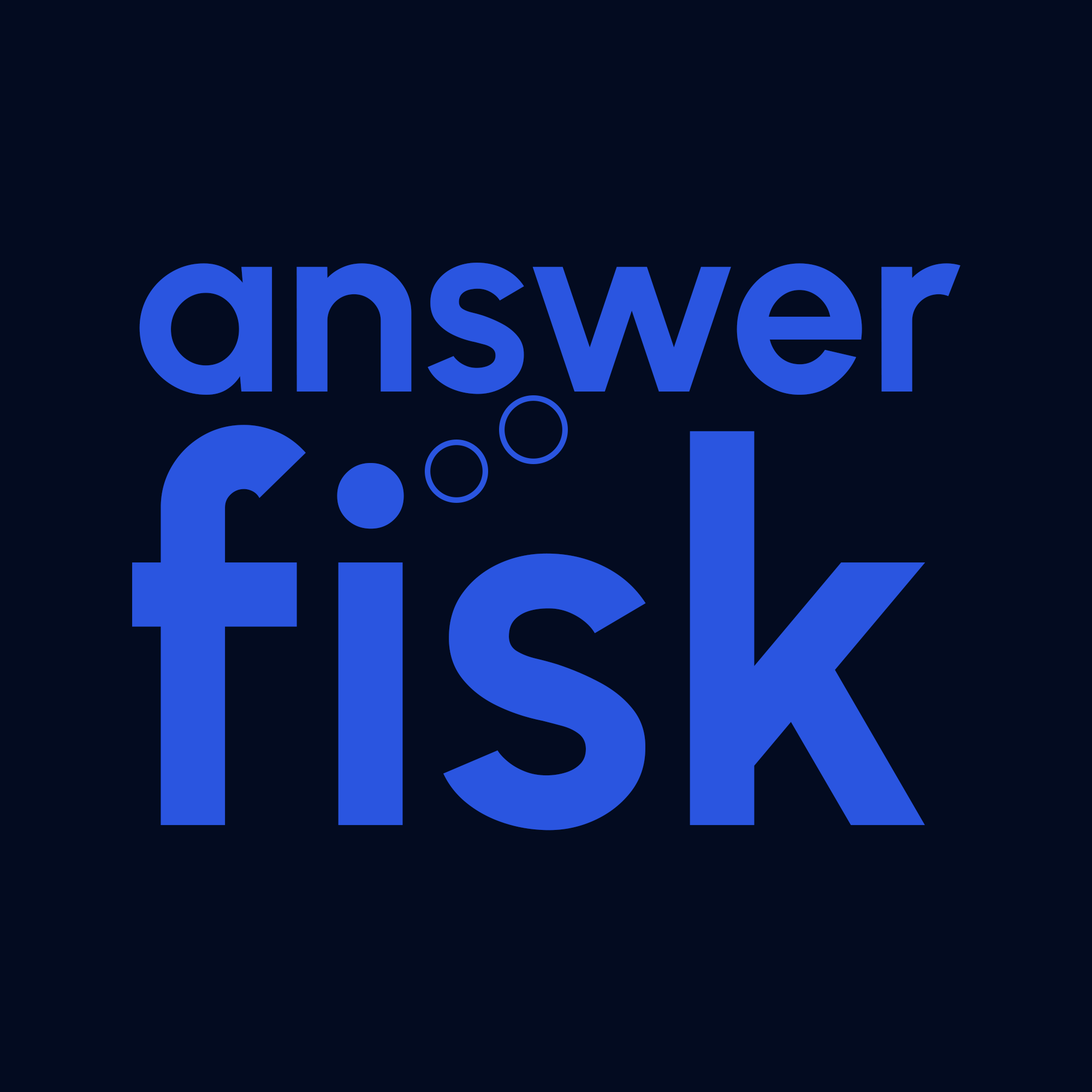
<style>
.page{position:relative;width:1092px;height:1092px;background:#030b20}
.page>*{position:absolute;margin:0}
.t1{font:249.1px "Urbanist-Bold";color:#2a55e0}
.t2{font:525px "Urbanist-Bold";color:#2a55e0}
</style>
<div class="page">
<p class="t1" style="left:139px;top:263px;width:821px;height:132px">answer</p>
<p class="t2" style="left:132px;top:425px;width:793px;height:405px">fisk</p>
</div>
